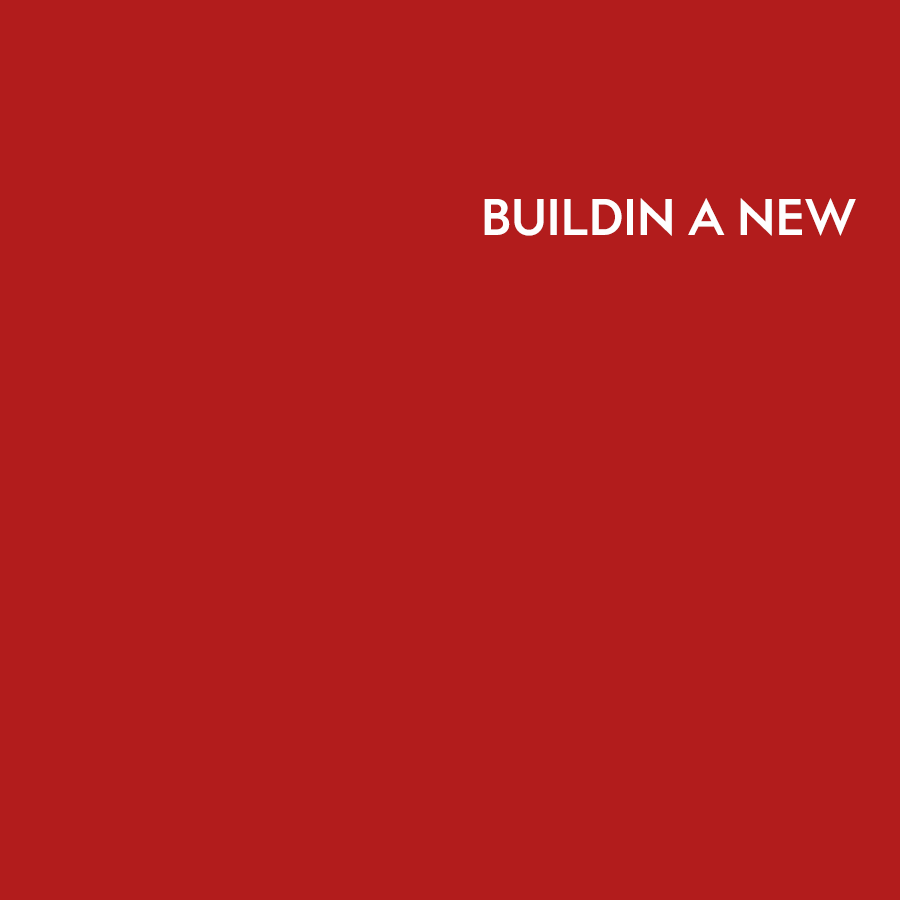
<style>
.page{position:relative;width:900px;height:900px;background:#b21c1c}
.page>*{position:absolute;margin:0}
.t1{font:51px "FONTSPRINGDEMO-CosmataSemiBoldRegular";color:#fefefe}
</style>
<div class="page">
<p class="t1" style="left:484px;top:198px;width:372px;height:38px">BUILDIN A NEW</p>
</div>
